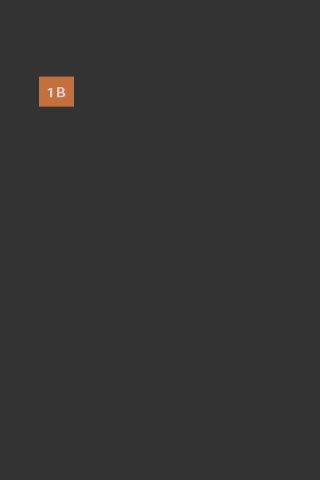
<style>
.page{position:relative;width:320px;height:480px;background:#333333}
.page>*{position:absolute;margin:0}
.t1{font:13.8px "MyriadPro-Regular";color:#d7d0cb;font-weight:bold;scale:1.29 1}
</style>
<div class="page">
<p class="t1" style="left:47px;top:87px;width:19px;height:11px">1B</p>
</div>
